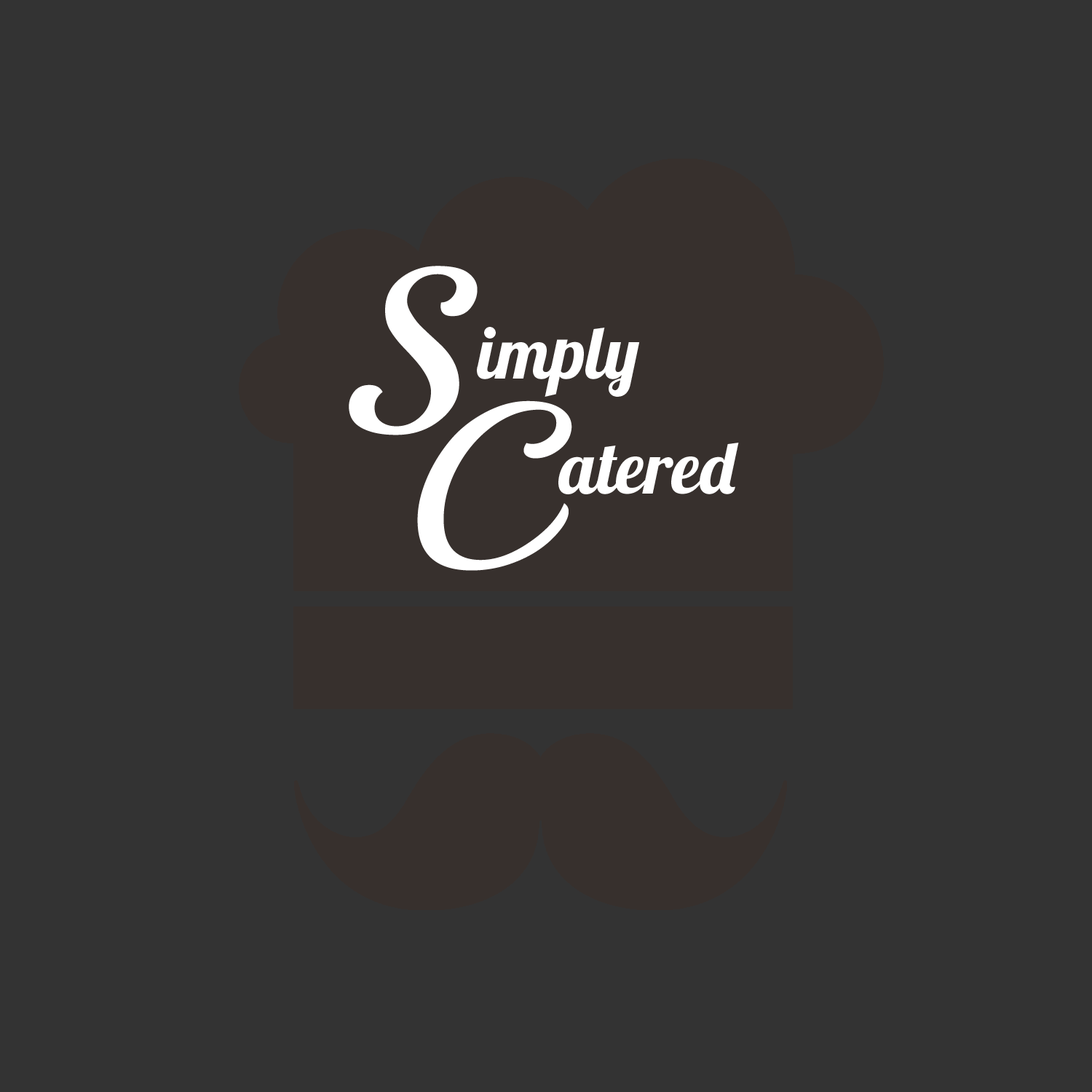
<style>
.page{position:relative;width:1092px;height:1092px;background:#333333}
.page>*{position:absolute;margin:0}
.t1{font:229.3px "Playball-Regular";color:#ffffff}
.t2{font:72.8px "Lobster1.4";color:#ffffff}
</style>
<div class="page">
<p class="t1" style="left:349px;top:266px;width:129px;height:169px">S</p>
<p class="t2" style="left:477px;top:327px;width:163px;height:70px">imply</p>
<p class="t1" style="left:417px;top:400px;width:155px;height:171px">C</p>
<p class="t2" style="left:558px;top:443px;width:181px;height:51px">atered</p>
</div>
